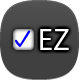
<style>
.page{position:relative;width:79px;height:80px;background:#404040}
.page>*{position:absolute;margin:0}
.t1{font:30px "MyriadPro-Regular";color:#ffffff}
</style>
<div class="page">
<p class="t1" style="left:40px;top:29px;width:29px;height:21px">EZ</p>
</div>
